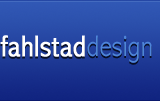
<style>
.page{position:relative;width:160px;height:101px}
.page>*{position:absolute;margin:0}
.t1{font:30px "AbadiMT-CondensedLight";color:#ffffff;font-weight:bold}
.t2{font:30px "AbadiMT-CondensedLight";color:#4e85d8}
</style>
<div class="page">
<p class="t1" style="left:0px;top:35px;width:152px;height:28px">fahlstad<span class="t2">design</span></p>
</div>
